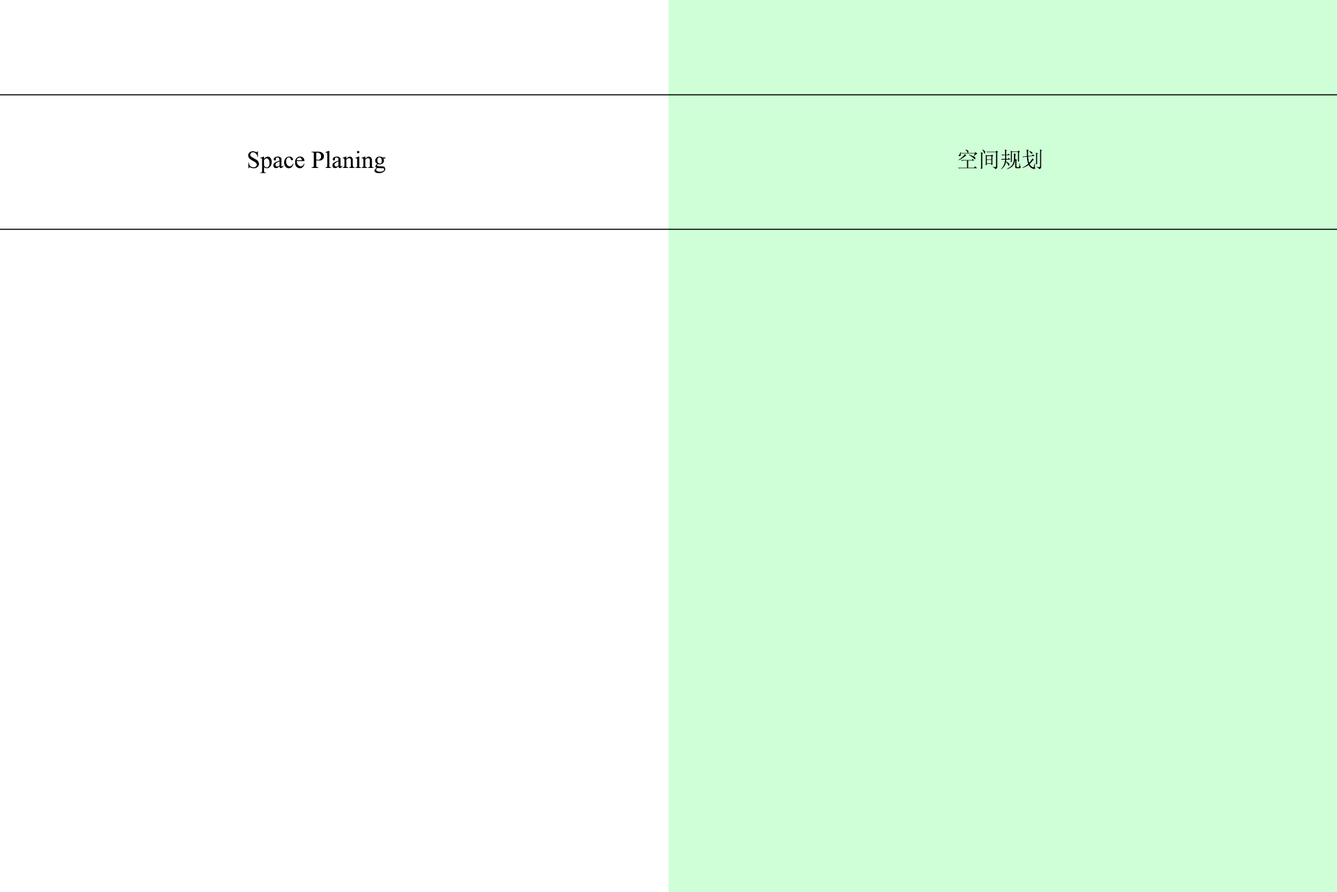
<style>
.page{position:relative;width:1337px;height:892px;background:#ceffd7}
.page>*{position:absolute;margin:0}
.t1{font:21.7px "SimSun";color:#000000}
.t2{font:24.5px "TimesNewRomanPSMT";color:#000000}
</style>
<div class="page">
<p class="t1" style="left:958px;top:149px;width:85px;height:20px">空间规划</p>
<p class="t2" style="left:248px;top:150px;width:138px;height:23px">Space Planing</p>
</div>
